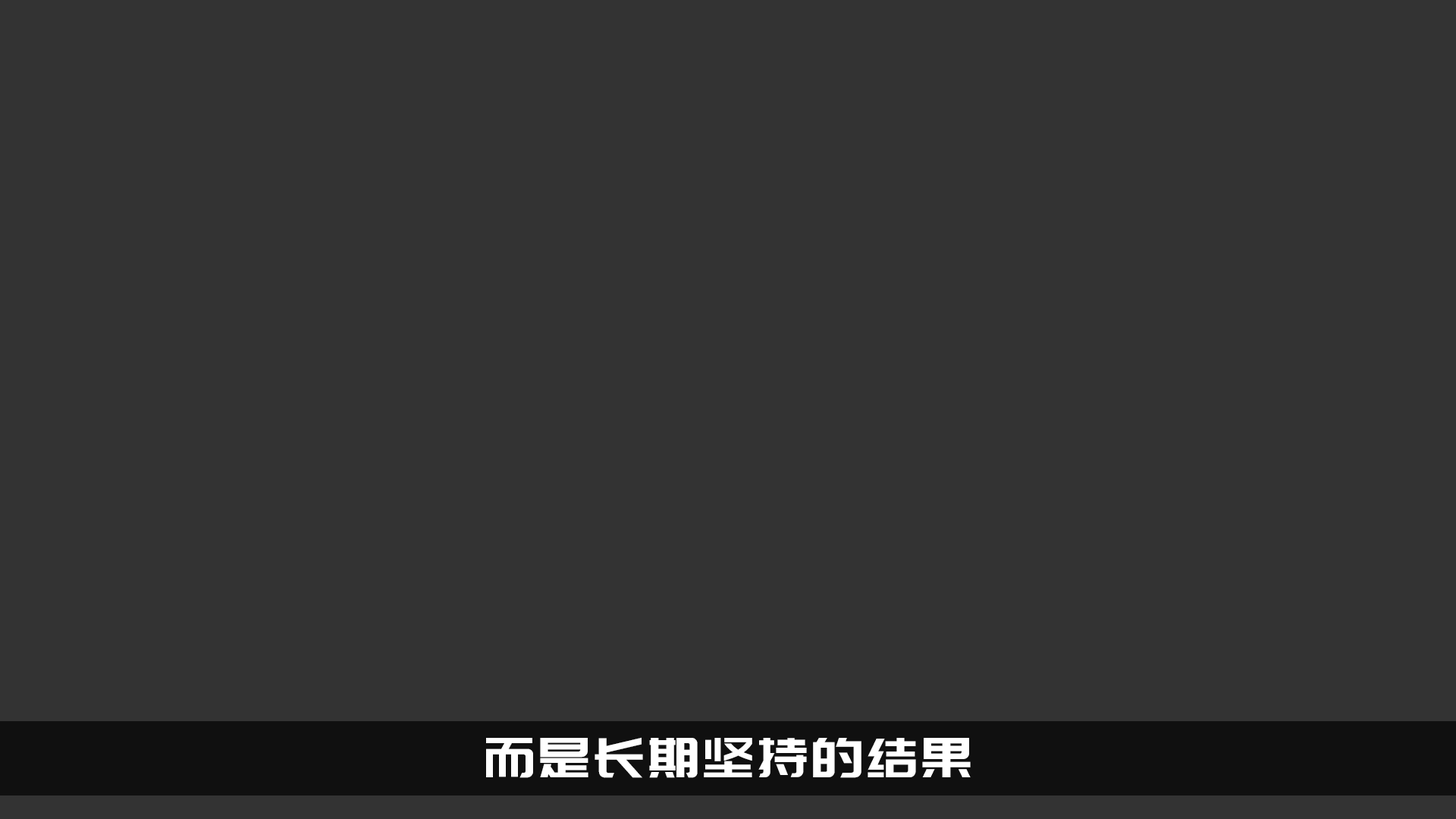
<style>
.page{position:relative;width:1456px;height:819px;background:#333333}
.page>*{position:absolute;margin:0}
.t1{font:54.6px "PangMenZhengDao-3";color:#ffffff}
</style>
<div class="page">
<p class="t1" style="left:486px;top:737px;width:485px;height:41px">而是长期坚持的结果</p>
</div>
